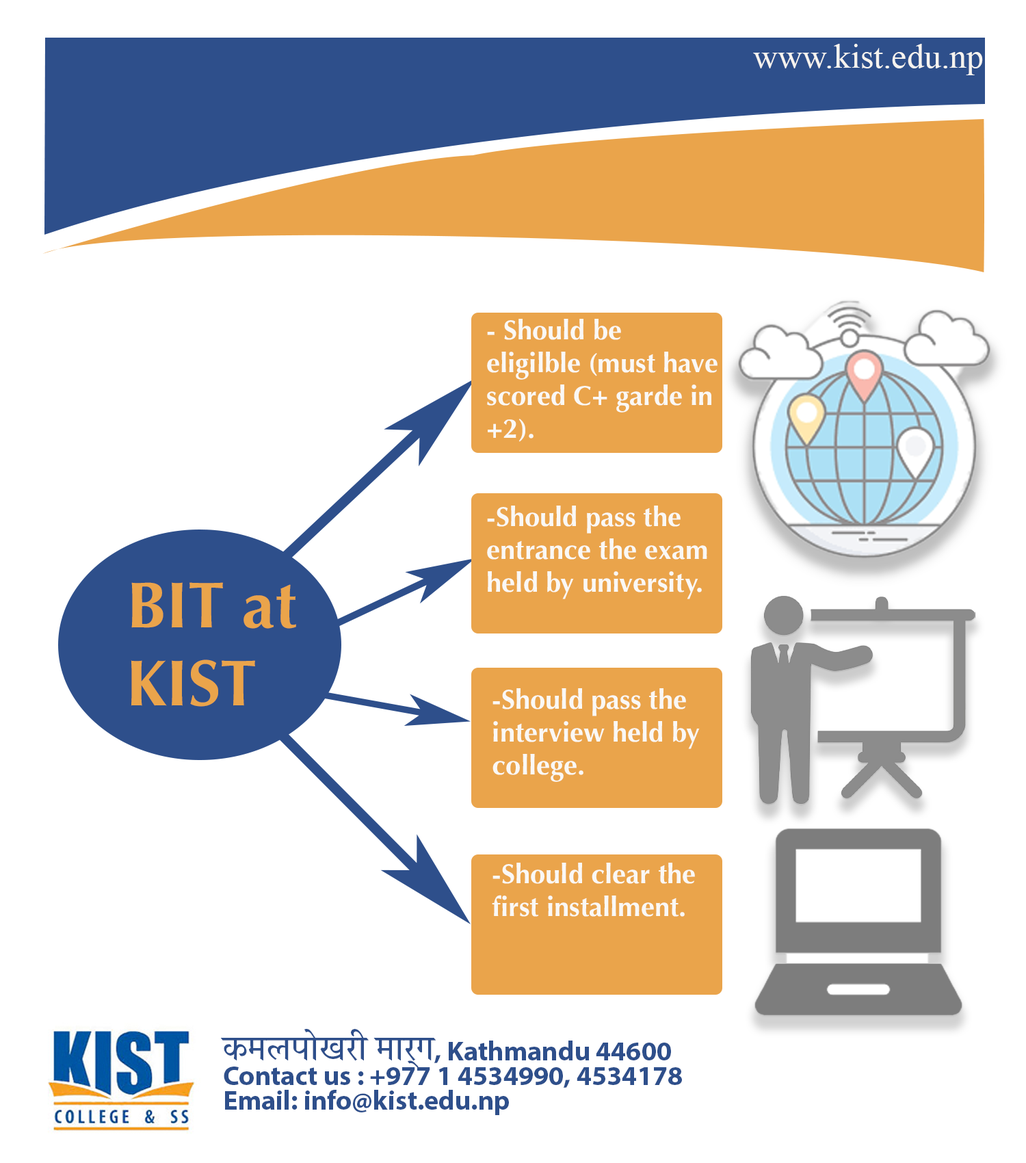
<style>
.page{position:relative;width:1026px;height:1163px;background:#ffffff}
.page>*{position:absolute;margin:0}
.t1{font:34.2px "TimesNewRomanPSMT";color:#f6f3ef}
.t2{font:27.4px "Optima-Bold";color:#faf8f5}
.t3{font:65.2px "Optima-Bold";color:#eaa44b}
.t4{font:27.4px/24.6px "MyriadPro-Bold";color:#2e4f8b}
.t5{font:34.2px/24.6px "ITFDevanagari-Medium";color:#2e4f8b}
</style>
<div class="page">
<p class="t1" style="left:753px;top:44px;width:230px;height:31px">www.kist.edu.np</p>
<p class="t2" style="left:487px;top:319px;width:230px;height:123px">- Should be eligilble (must have scored C+ garde in +2).</p>
<p class="t2" style="left:487px;top:505px;width:220px;height:94px">-Should pass the entrance the exam held by university.</p>
<p class="t3" style="left:131px;top:582px;width:165px;height:124px">BIT at <br>KIST</p>
<p class="t2" style="left:492px;top:688px;width:208px;height:94px">-Should pass the interview held by college.</p>
<p class="t2" style="left:492px;top:862px;width:203px;height:54px">-Should clear the first installment.</p>
<p class="t4" style="left:221px;top:1028px;width:461px;height:87px"><span class="t5">कमलपोखरी मार्ग</span>, Kathmandu 44600<br>Contact us : +977 1 4534990, 4534178<br>Email: info@kist.edu.np</p>
</div>
